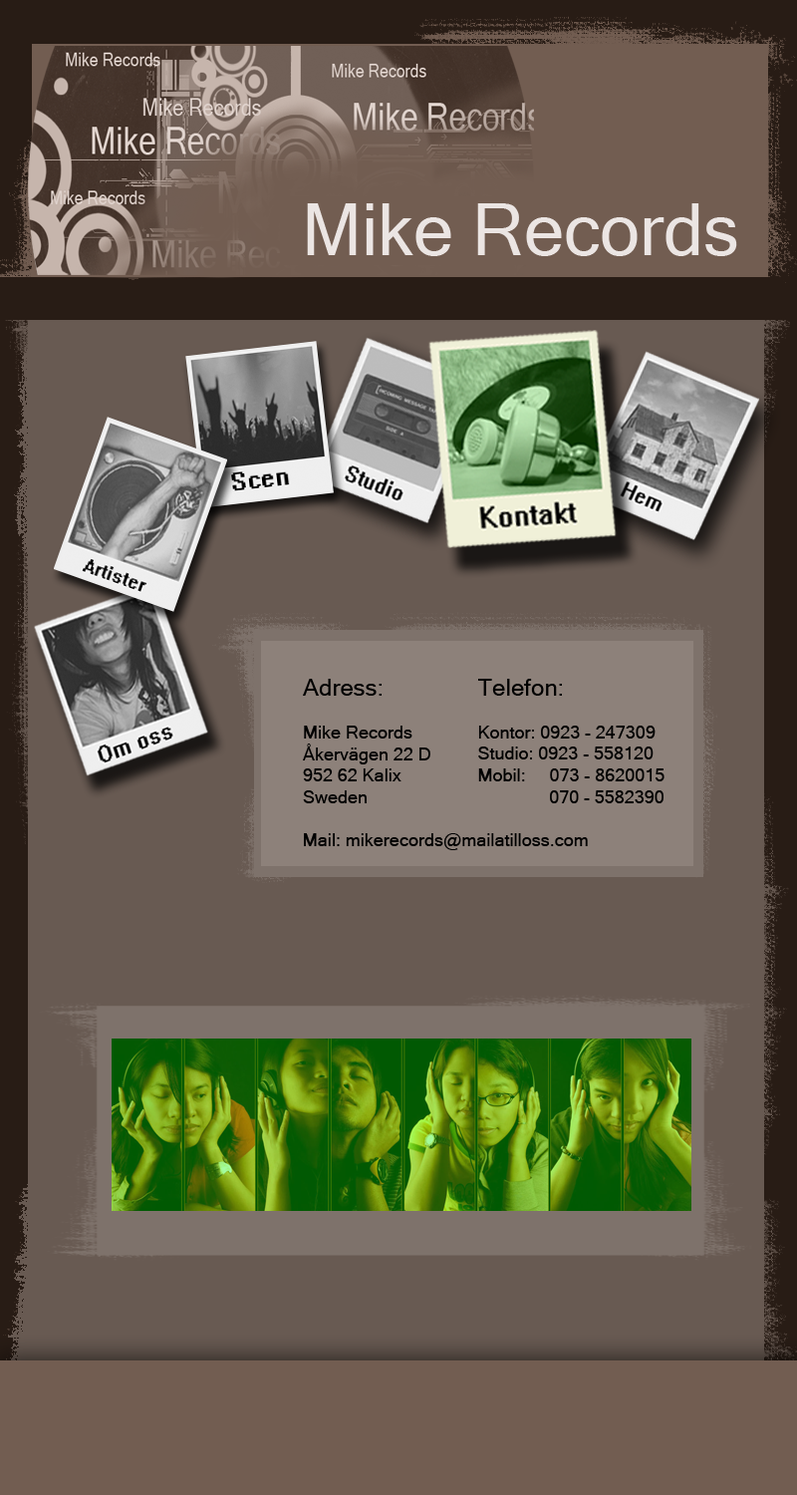
<style>
.page{position:relative;width:797px;height:1495px;background:#685a52}
.page>*{position:absolute;margin:0}
.t1{font:17.9px "MicrosoftSansSerif";color:#000000}
.t2{font:23.9px "MicrosoftSansSerif";color:#000000}
</style>
<div class="page">
<p class="t1" style="left:303px;top:679px;width:128px;height:124px"><span class="t2">Adress:<br></span><br>Mike Records<br>Åkervägen 22 D<br>952 62 Kalix<br>Sweden</p>
<p class="t1" style="left:478px;top:679px;width:187px;height:124px"><span class="t2">Telefon:</span><br><br>Kontor: 0923 - 247309<br>Studio: 0923 - 558120<br>Mobil:     073 - 8620015<br>               070 - 5582390</p>
<p class="t1" style="left:304px;top:833px;width:284px;height:17px">Mail: mikerecords@mailatilloss.com</p>
</div>
